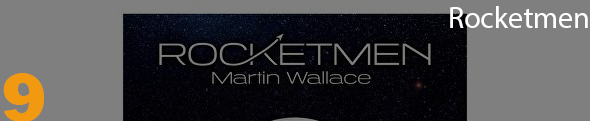
<style>
.page{position:relative;width:590px;height:121px;background:#7f7f7f}
.page>*{position:absolute;margin:0}
.t1{font:30px "MyriadPro-Regular";color:#ffffff}
.t2{font:70px "Rockwell-ExtraBold";color:#f09911}
</style>
<div class="page">
<p class="t1" style="left:450px;top:6px;width:138px;height:22px">Rocketmen</p>
<p class="t2" style="left:3px;top:73px;width:41px;height:49px">9</p>
</div>
